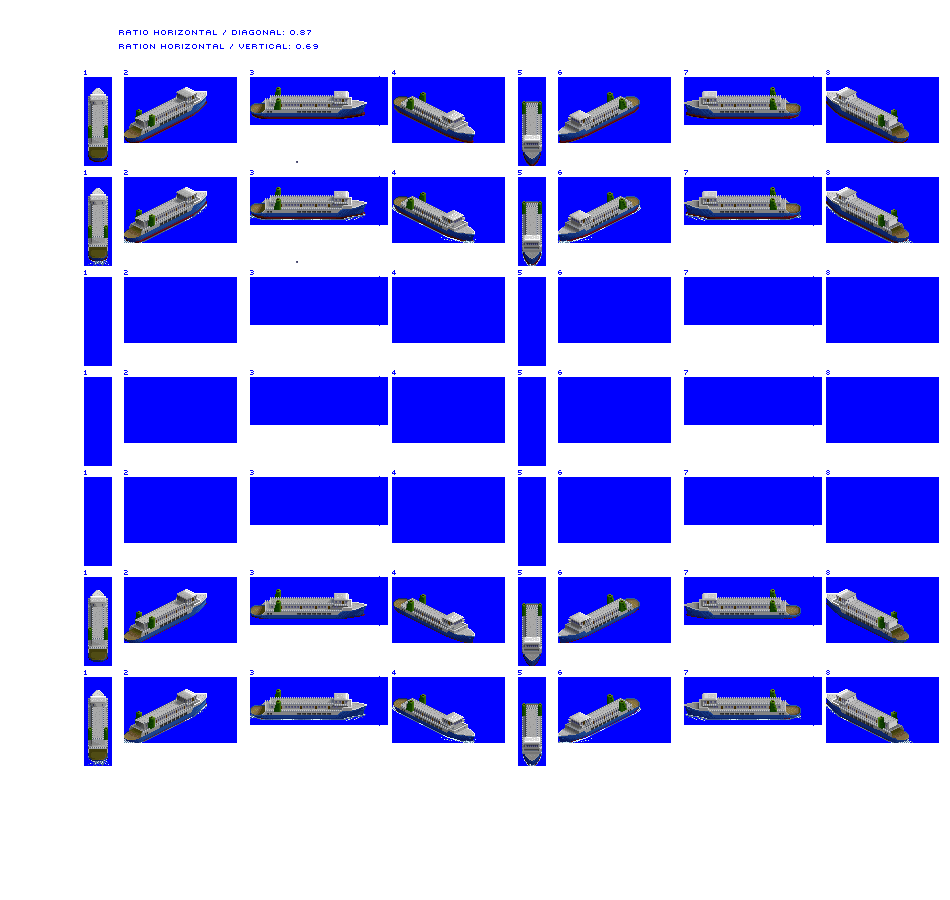
<style>
.page{position:relative;width:950px;height:900px;background:#ffffff}
.page>*{position:absolute;margin:0}
.t1{font:10px/14px "Mini7";color:#0000ff}
</style>
<div class="page">
<p class="t1" style="left:119px;top:30px;width:199px;height:19px">ratio horizontal / diagonal: 0.87<br>Ration horizontal / vertical: 0.69</p>
</div>
